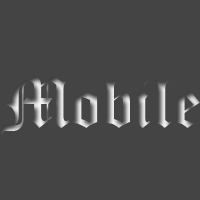
<style>
.page{position:relative;width:200px;height:200px;background:#444444}
.page>*{position:absolute;margin:0}
.t1{font:70px "OldEnglishTextMT"}
</style>
<div class="page">
<p class="t1" style="left:0px;top:76px;width:200px;height:58px">Mobile</p>
</div>
